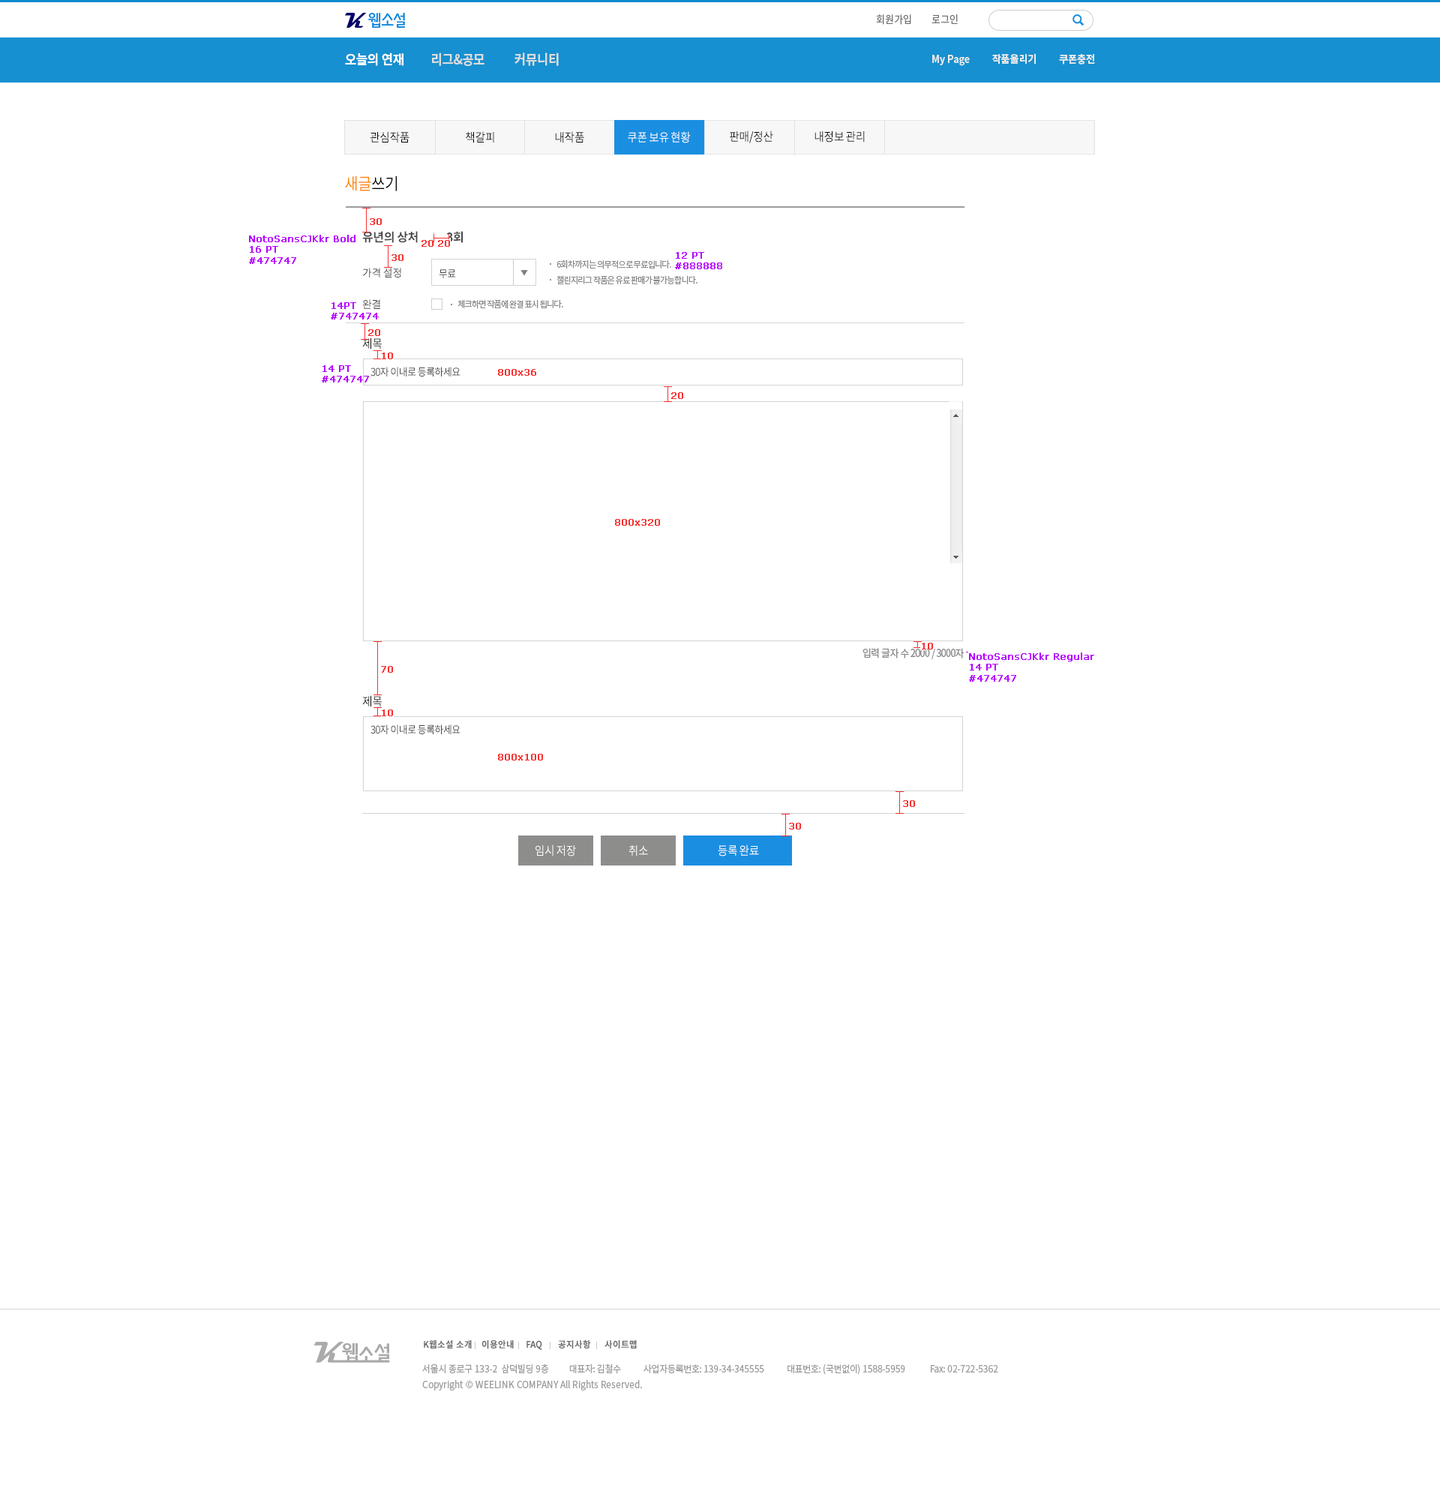
<style>
.page{position:relative;width:1440px;height:1500px;background:#ffffff}
.page>*{position:absolute;margin:0}
.t1{font:10.5px "NotoSansCJKkr-Regular";letter-spacing:-0.002em;color:#727272;scale:0.92 1}
.t2{font:13.5px "NotoSansCJKkr-Bold";letter-spacing:-0.002em;color:#dddddd;scale:0.92 1}
.t3{font:13.5px "NotoSansCJKkr-Bold";letter-spacing:-0.002em;color:#ffffff;scale:0.92 1}
.t4{font:10.5px "NotoSansCJKkr-Bold";letter-spacing:-0.002em;color:#ececec;scale:0.92 1}
.t5{font:12px "NotoSansCJKkr-Regular";letter-spacing:-0.05em;color:#000000;scale:0.92 1}
.t6{font:12px "NotoSansCJKkr-Regular";letter-spacing:-0.05em;color:#ffffff;scale:0.92 1}
.t7{font:16.5px "NotoSansCJKkr-Regular";letter-spacing:-0.05em;color:#ff8400;scale:0.92 1}
.t8{font:16.5px "NotoSansCJKkr-Regular";letter-spacing:-0.05em;color:#000000;scale:0.92 1}
.t9{font:9px "Verdana";color:#f83030;font-weight:bold}
.t10{font:12px "NotoSansCJKkr-Bold";letter-spacing:-0.025em;color:#474747}
.t11{font:9px "Verdana";color:#b400ff;font-weight:bold}
.t12{font:10.5px "NotoSansCJKkr-Regular";letter-spacing:-0.025em;color:#474747}
.t13{font:10.5px "NotoSansCJKkr-Regular";letter-spacing:-0.05em;color:#474747;scale:0.92 1}
.t14{font:9px "NotoSansCJKkr-Regular";letter-spacing:-0.05em;color:#888888;scale:0.92 1}
.t15{font:10.5px "NotoSansCJKkr-Regular";letter-spacing:-0.05em;color:#888888;scale:0.92 1}
.t16{font:9px "NotoSansCJKkr-Bold";color:#666666;scale:0.96 1}
.t17{font:9.8px "NotoSansCJKkr-Regular";letter-spacing:-0.025em;color:#9d9d9d;scale:0.92 1}
.t18{font:9.8px "NotoSansCJKkr-Regular";color:#9d9d9d;scale:0.92 1}
</style>
<div class="page">
<p class="t1" style="left:876px;top:14px;width:35px;height:11px">회원가입</p>
<p class="t1" style="left:932px;top:14px;width:26px;height:10px">로그인</p>
<p class="t2" style="left:345px;top:52px;width:214px;height:14px"><span class="t3">오늘의 연재         </span>리그&amp;공모          커뮤니티</p>
<p class="t4" style="left:932px;top:53px;width:163px;height:13px">My Page          작품올리기          쿠폰충전</p>
<p class="t5" style="left:370px;top:131px;width:40px;height:12px">관심작품</p>
<p class="t5" style="left:466px;top:131px;width:28px;height:12px">책갈피</p>
<p class="t5" style="left:555px;top:131px;width:29px;height:12px">내작품</p>
<p class="t6" style="left:628px;top:131px;width:63px;height:12px">쿠폰 보유 현황</p>
<p class="t5" style="left:730px;top:130px;width:43px;height:13px">판매/정산</p>
<p class="t5" style="left:814px;top:131px;width:51px;height:11px">내정보 관리</p>
<p class="t7" style="left:345px;top:176px;width:52px;height:15px">새글<span class="t8">쓰기</span></p>
<p class="t9" style="left:370px;top:218px;width:12px;height:7px">30</p>
<p class="t10" style="left:362px;top:231px;width:56px;height:12px">유년의 상처</p>
<p class="t10" style="left:446px;top:231px;width:17px;height:12px">3회</p>
<p class="t11" style="left:249px;top:235px;width:107px;height:29px">NotoSansCJKkr Bold<br>16 PT<br>#474747</p>
<p class="t9" style="left:422px;top:240px;width:12px;height:7px">20</p>
<p class="t9" style="left:438px;top:240px;width:12px;height:7px">20</p>
<p class="t9" style="left:392px;top:254px;width:12px;height:7px">30</p>
<p class="t11" style="left:675px;top:252px;width:47px;height:17px">12 PT<br>#888888</p>
<p class="t12" style="left:362px;top:268px;width:39px;height:10px">가격 설정</p>
<p class="t13" style="left:439px;top:269px;width:17px;height:9px">무료</p>
<p class="t14" style="left:556px;top:260px;width:115px;height:9px">6회차까지는 의무적으로 무료입니다.</p>
<p class="t14" style="left:556px;top:275px;width:142px;height:9px">챌린지리그 작품은 유료 판매가 불가능합니다.</p>
<p class="t11" style="left:331px;top:302px;width:48px;height:18px">14PT<br>#747474</p>
<p class="t12" style="left:362px;top:299px;width:18px;height:10px">완결</p>
<p class="t14" style="left:458px;top:299px;width:105px;height:10px">체크하면 작품에 완결 표시 됩니다.</p>
<p class="t9" style="left:368px;top:329px;width:12px;height:7px">20</p>
<p class="t5" style="left:362px;top:338px;width:20px;height:12px">제목</p>
<p class="t9" style="left:382px;top:352px;width:11px;height:7px">10</p>
<p class="t11" style="left:322px;top:365px;width:47px;height:17px">14 PT<br>#474747</p>
<p class="t13" style="left:370px;top:367px;width:90px;height:9px">30자 이내로 등록하세요</p>
<p class="t9" style="left:498px;top:369px;width:38px;height:7px">800x36</p>
<p class="t9" style="left:671px;top:392px;width:12px;height:7px">20</p>
<p class="t9" style="left:615px;top:519px;width:45px;height:7px">800x320</p>
<p class="t15" style="left:862px;top:648px;width:102px;height:11px">입력 글자 수 2000 / 3000자</p>
<p class="t9" style="left:922px;top:643px;width:11px;height:7px">10</p>
<p class="t11" style="left:969px;top:652px;width:125px;height:30px">NotoSansCJKkr Regular<br>14 PT<br>#474747</p>
<p class="t9" style="left:381px;top:666px;width:12px;height:7px">70</p>
<p class="t5" style="left:362px;top:695px;width:20px;height:12px">제목</p>
<p class="t9" style="left:382px;top:710px;width:11px;height:6px">10</p>
<p class="t13" style="left:370px;top:724px;width:90px;height:10px">30자 이내로 등록하세요</p>
<p class="t9" style="left:498px;top:754px;width:45px;height:6px">800x100</p>
<p class="t9" style="left:903px;top:800px;width:12px;height:7px">30</p>
<p class="t9" style="left:789px;top:823px;width:12px;height:7px">30</p>
<p class="t6" style="left:536px;top:844px;width:40px;height:12px">임시 저장</p>
<p class="t6" style="left:628px;top:845px;width:20px;height:11px">취소</p>
<p class="t6" style="left:718px;top:844px;width:41px;height:12px">등록 완료</p>
<p class="t16" style="left:424px;top:1340px;width:48px;height:8px">K웹소설 소개</p>
<p class="t16" style="left:482px;top:1340px;width:32px;height:9px">이용안내</p>
<p class="t16" style="left:526px;top:1340px;width:16px;height:10px">FAQ</p>
<p class="t16" style="left:558px;top:1340px;width:33px;height:8px">공지사항</p>
<p class="t16" style="left:604px;top:1340px;width:33px;height:9px">사이트맵</p>
<p class="t17" style="left:422px;top:1364px;width:576px;height:11px">서울시 종로구 133-2  삼덕빌딩 9층          대표자: 김철수           사업자등록번호: 139-34-345555           대표번호: (국번없이) 1588-5959            Fax: 02-722-5362</p>
<p class="t18" style="left:422px;top:1379px;width:220px;height:11px"><span class="t17"><br><br></span>Copyright © WEELINK COMPANY All Rights Reserved.</p>
</div>
